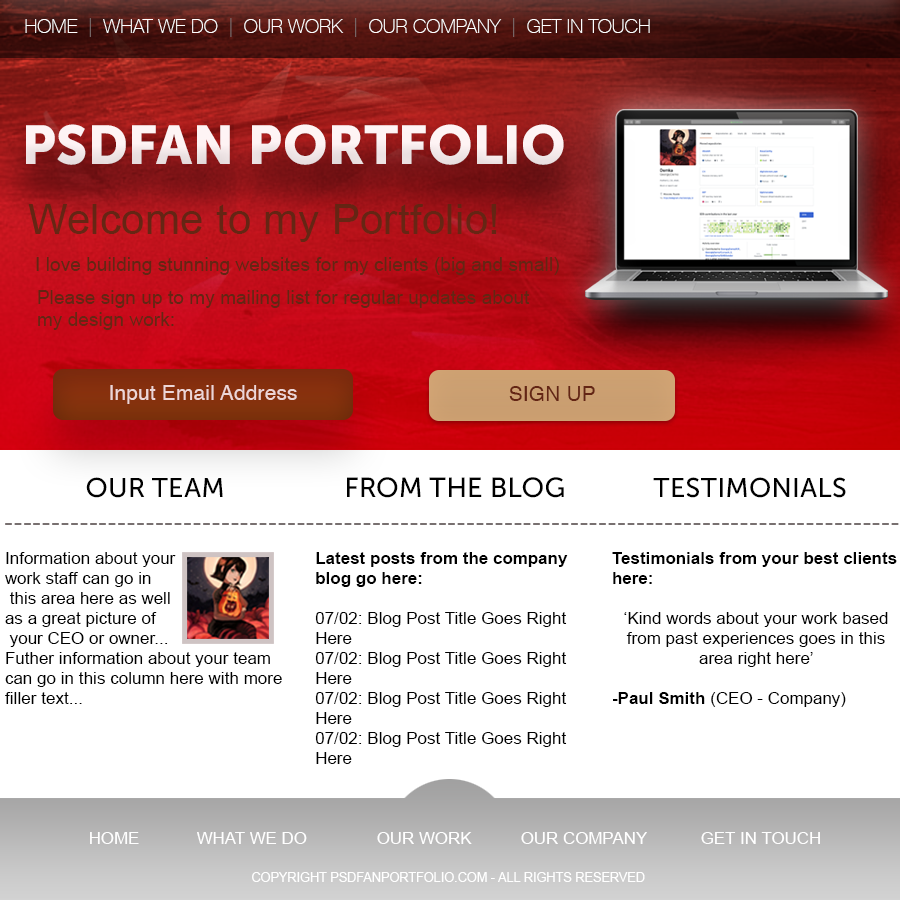
<style>
.page{position:relative;width:900px;height:900px;background:#ffffff}
.page>*{position:absolute;margin:0}
.t1{font:18.7px "HelveticaNeue-Thin";letter-spacing:0.01em;color:#ffffff;text-transform:uppercase}
.t2{font:18.7px "HelveticaNeue-Thin";letter-spacing:0.01em;color:#7b6e6e;text-transform:uppercase}
.t3{font:54.2px "MuseoSansCyrl-900";letter-spacing:0.01em;color:#ffffff;text-transform:uppercase}
.t4{font:41.7px "ArialMT";letter-spacing:0.01em;color:#7a2d18}
.t5{font:18.7px "ArialMT";letter-spacing:0.01em;color:#7a2d18}
.t6{font:20.8px "Helvetica";letter-spacing:0.01em;color:#edd6d6}
.t7{font:20.8px "Helvetica";letter-spacing:0.01em;color:#642514;text-transform:uppercase}
.t8{font:27.1px "MuseoSansCyrl-500";letter-spacing:0.01em;color:#000000;text-transform:uppercase}
.t9{font:27.5px "MuseoSansCyrl-500";letter-spacing:0.01em;color:#000000;text-transform:uppercase}
.t10{font:27.5px "Helvetica";letter-spacing:0.01em;color:#787070;text-transform:uppercase}
.t11{font:16.7px "ArialMT";letter-spacing:0.01em;color:#000000}
.t12{font:16.7px "Arial-BoldMT";letter-spacing:0.01em;color:#000000;text-transform:uppercase}
.t13{font:16.7px "Arial-BoldMT";letter-spacing:0.01em;color:#000000}
.t14{font:16.7px "ArialMT";letter-spacing:0.01em;color:#ffffff}
.t15{font:12.5px "ArialMT";letter-spacing:0.01em;color:#ffffff}
</style>
<div class="page">
<p class="t1" style="left:25px;top:18px;width:625px;height:19px">HOME  <span class="t2">|</span>  WHAT WE DO  <span class="t2">|</span>  OUR WORK  <span class="t2">|</span>  OUR COMPANY  <span class="t2">|</span>  GET IN TOUCH</p>
<p class="t3" style="left:26px;top:124px;width:538px;height:41px">PSDFAN PORTFOLIO</p>
<p class="t4" style="left:28px;top:204px;width:469px;height:38px">Welcome to my Portfolio!</p>
<p class="t5" style="left:36px;top:257px;width:523px;height:18px">I love building stunning websites for my clients (big and small)</p>
<p class="t5" style="left:38px;top:290px;width:492px;height:40px">Please sign up to my mailing list for regular updates about<br>my design work:</p>
<p class="t6" style="left:110px;top:385px;width:187px;height:19px">Input Email Address</p>
<p class="t7" style="left:509px;top:386px;width:86px;height:15px">SIGN UP</p>
<p class="t8" style="left:86px;top:477px;width:137px;height:21px">OUR TEAM</p>
<p class="t9" style="left:347px;top:477px;width:217px;height:21px">FROM THE BLOG</p>
<p class="t8" style="left:653px;top:477px;width:193px;height:21px">TESTIMONIALS</p>
<p class="t10" style="left:5px;top:523px;width:894px;height:2px">-----------------------------------------------------------------------------------------------</p>
<p class="t11" style="left:5px;top:552px;width:277px;height:152px">Information about your<br>work staff can go in<br> this area here as well<br>as a great picture of<br> your CEO or owner...<br>Futher information about your team can go in this column here with more filler text...</p>
<p class="t11" style="left:315px;top:552px;width:253px;height:212px"><span class="t12"><br>L</span><span class="t13">atest posts from the company blog go here:<br></span><br>07/02: Blog Post Title Goes Right Here<br>07/02: Blog Post Title Goes Right Here<br>07/02: Blog Post Title Goes Right Here<br>07/02: Blog Post Title Goes Right Here</p>
<p class="t11" style="left:612px;top:552px;width:285px;height:155px"><span class="t13"><br>Testimonials from your best clients here:<br><br></span>‘Kind words about your work based from past experiences goes in this area right here’<br><br><span class="t13">-Paul Smith </span>(CEO - Company)</p>
<p class="t14" style="left:90px;top:832px;width:730px;height:12px">HOME  WHAT WE DO   OUR WORK  OUR COMPANY  GET IN TOUCH</p>
<p class="t15" style="left:252px;top:872px;width:393px;height:10px">COPYRIGHT PSDFANPORTFOLIO.COM - ALL RIGHTS RESERVED</p>
</div>
